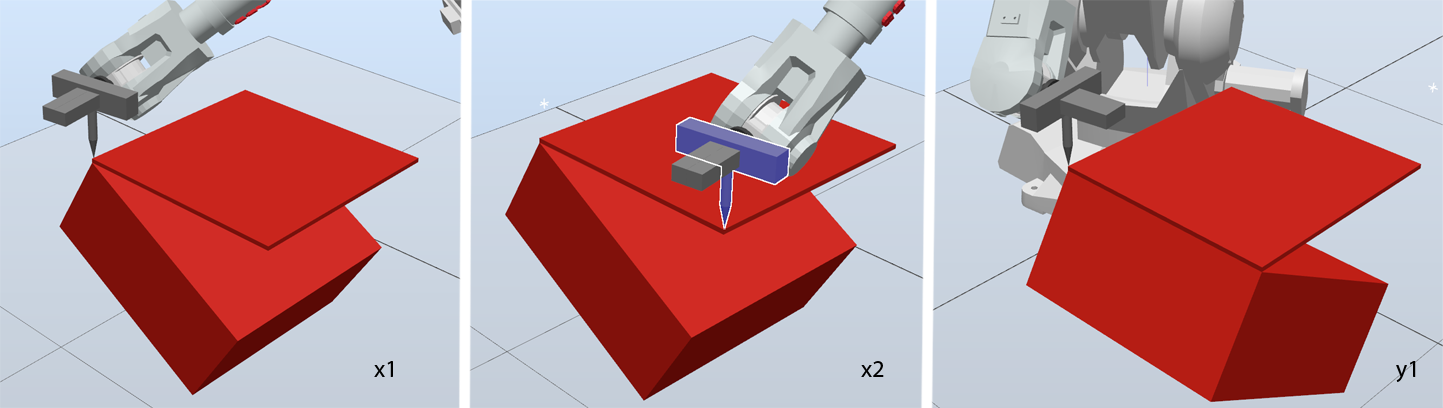
<style>
.page{position:relative;width:1443px;height:408px}
.page>*{position:absolute;margin:0}
.t1{font:24px "MyriadPro-Regular";color:#000000}
</style>
<div class="page">
<p class="t1" style="left:374px;top:361px;width:19px;height:16px">x1</p>
<p class="t1" style="left:861px;top:361px;width:23px;height:16px">x2</p>
<p class="t1" style="left:1396px;top:361px;width:20px;height:21px">y1</p>
</div>
